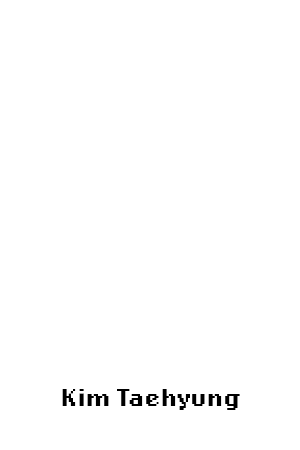
<style>
.page{position:relative;width:300px;height:450px;background:#ffffff}
.page>*{position:absolute;margin:0}
.t1{font:25px "LoRes12OT-Bold";color:#000000}
</style>
<div class="page">
<p class="t1" style="left:62px;top:389px;width:178px;height:21px">Kim Taehyung</p>
</div>
